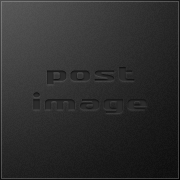
<style>
.page{position:relative;width:180px;height:180px}
.page>*{position:absolute;margin:0}
.t1{font:24px "SFQuartziteExtended";letter-spacing:0.1em;color:#2c2c2c}
</style>
<div class="page">
<p class="t1" style="left:33px;top:67px;width:114px;height:46px;text-align:center">post<br>image</p>
</div>
